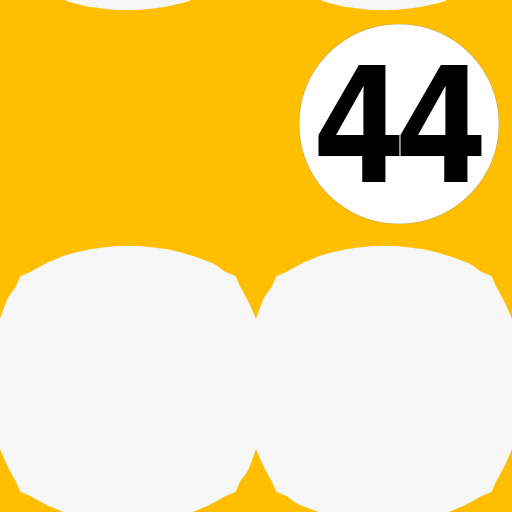
<style>
.page{position:relative;width:512px;height:512px;background:#f7f7f7}
.page>*{position:absolute;margin:0}
.t1{font:172.5px "FranklinGothic-Demi";letter-spacing:-0.05em;color:#010101;scale:0.87 1}
</style>
<div class="page">
<p class="t1" style="left:318px;top:65px;width:164px;height:117px">44</p>
</div>
